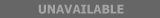
<style>
.page{position:relative;width:160px;height:18px;background:#666666}
.page>*{position:absolute;margin:0}
.t1{font:12px "Tahoma-Bold";color:#a3a3a3}
</style>
<div class="page">
<p class="t1" style="left:38px;top:4px;width:86px;height:10px">UNAVAILABLE</p>
</div>
